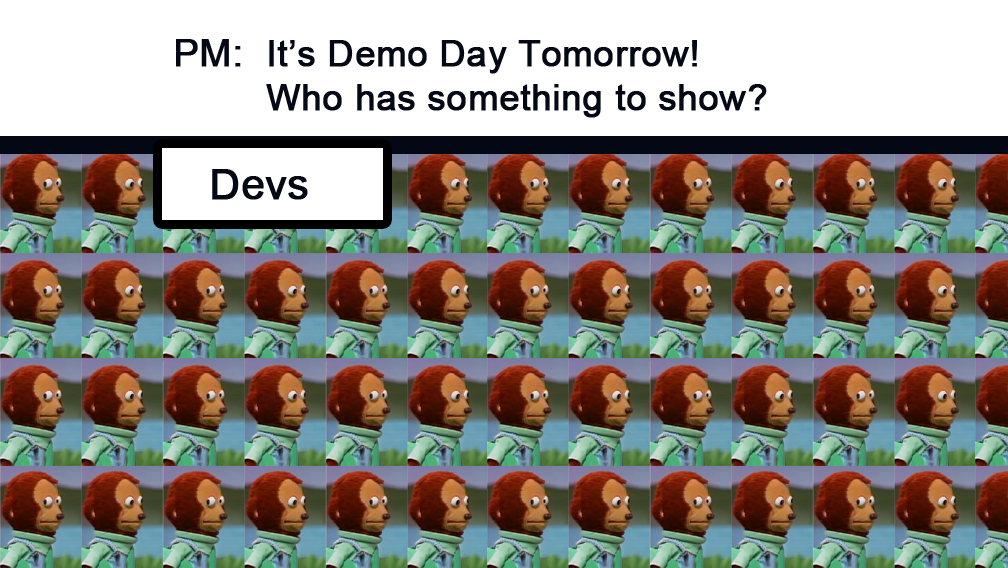
<style>
.page{position:relative;width:1008px;height:568px;background:#ffffff}
.page>*{position:absolute;margin:0}
.t1{font:37.5px "ArialMT";color:#040714;font-weight:bold}
.t2{font:36.3px "ArialMT";color:#040714;font-weight:bold}
.t3{font:41.6px "ArialMT";color:#040714;font-weight:bold}
</style>
<div class="page">
<p class="t1" style="left:176px;top:39px;width:65px;height:28px">PM:</p>
<p class="t2" style="left:266px;top:40px;width:501px;height:78px">It’s Demo Day Tomorrow!<br>Who has something to show?</p>
<p class="t3" style="left:212px;top:169px;width:96px;height:31px">Devs</p>
</div>
